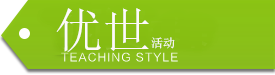
<style>
.page{position:relative;width:275px;height:75px}
.page>*{position:absolute;margin:0}
.t1{font:48px "SimSun";color:#fcf8f8}
.t2{font:12px "SimSun";color:#fcf8f8}
</style>
<div class="page">
<p class="t1" style="left:56px;top:8px;width:119px;height:44px">优世<span class="t2">活动</span></p>
</div>
